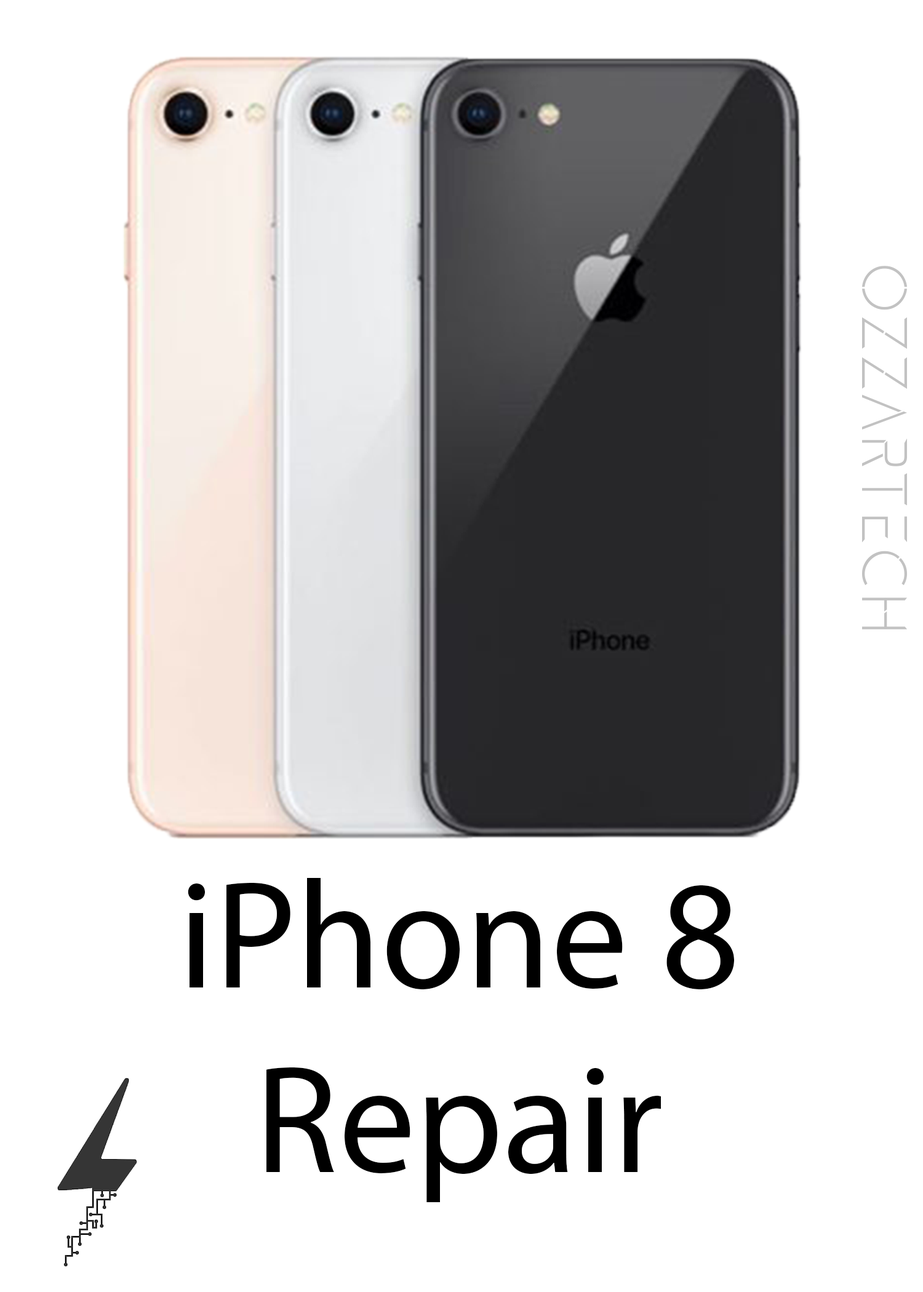
<style>
.page{position:relative;width:923px;height:1292px;background:#ffffff}
.page>*{position:absolute;margin:0}
.t1{font:64.1px "Gluon-Light";color:#c2c2c2}
.t2{font:153.8px "MyriadPro-Regular";color:#000000}
</style>
<div class="page">
<p class="t1" style="left:862px;top:266px;width:45px;height:363px;rotate:90deg">OzzarTech</p>
<p class="t2" style="left:188px;top:878px;width:546px;height:324px;text-align:center">iPhone 8<br>Repair</p>
</div>
